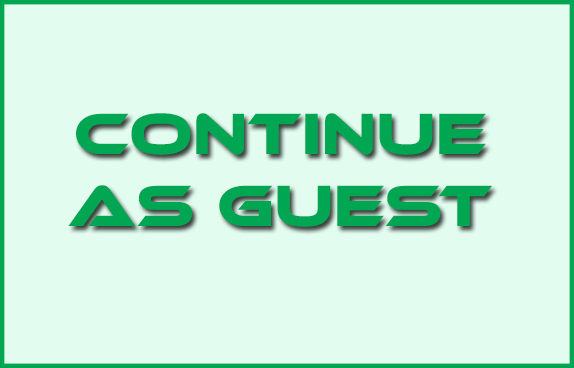
<style>
.page{position:relative;width:574px;height:368px;background:#e2fcef}
.page>*{position:absolute;margin:0}
.t1{font:60px/72px "EthnocentricRg-Regular";color:#00a651}
</style>
<div class="page">
<p class="t1" style="left:68px;top:113px;width:425px;height:114px;text-align:center">continue<br>as guest</p>
</div>
